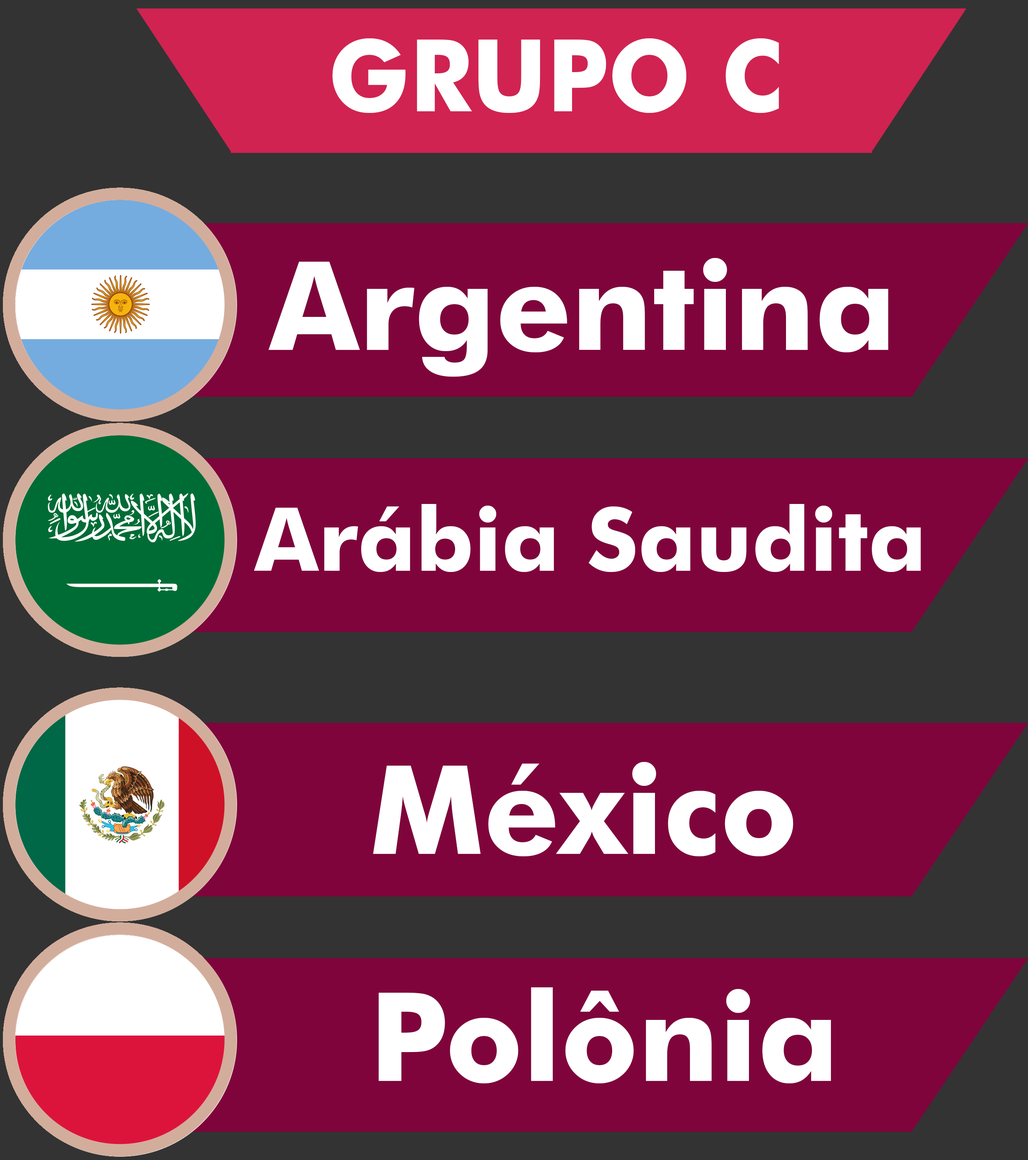
<style>
.page{position:relative;width:1028px;height:1160px;background:#7f043b}
.page>*{position:absolute;margin:0}
.t1{font:100.5px "FuturaBT-Bold";color:#ffffff;scale:0.96 1}
.t2{font:123.6px "FuturaBT-Bold";color:#ffffff}
.t3{font:88px "FuturaBT-Bold";color:#ffffff}
</style>
<div class="page">
<p class="t1" style="left:332px;top:38px;width:447px;height:75px">GRUPO C</p>
<p class="t2" style="left:268px;top:258px;width:620px;height:119px">Argentina</p>
<p class="t3" style="left:254px;top:504px;width:667px;height:68px">Arábia Saudita</p>
<p class="t2" style="left:373px;top:762px;width:420px;height:94px">México</p>
<p class="t2" style="left:378px;top:987px;width:453px;height:96px">Polônia</p>
</div>
